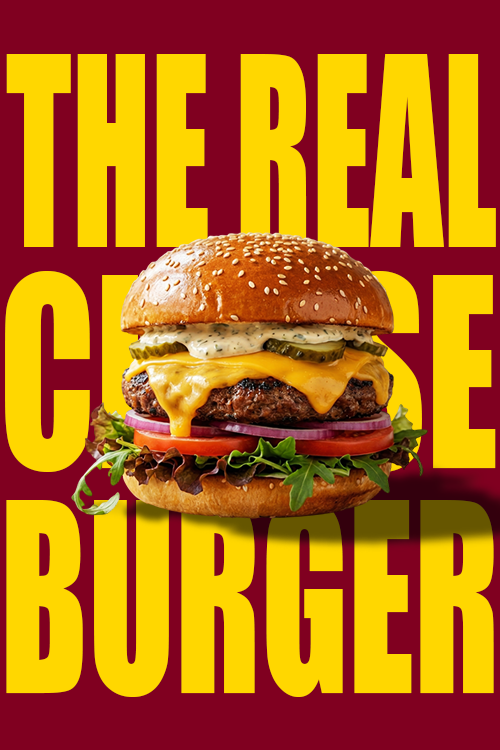
<style>
.page{position:relative;width:500px;height:750px;background:#ffd700}
.page>*{position:absolute;margin:0}
.t1{font:244.2px "Impact";color:#ffd700;scale:0.58 1}
.t2{font:244.2px "Impact";scale:0.71 1}
.t3{font:244.2px "Impact";color:#ffd700;scale:0.65 1}
</style>
<div class="page">
<p class="t1" style="left:6px;top:54px;width:490px;height:193px">THE REAL</p>
<p class="t2" style="left:5px;top:271px;width:491px;height:201px">CHEESE</p>
<p class="t3" style="left:6px;top:496px;width:488px;height:201px">BURGER</p>
</div>
